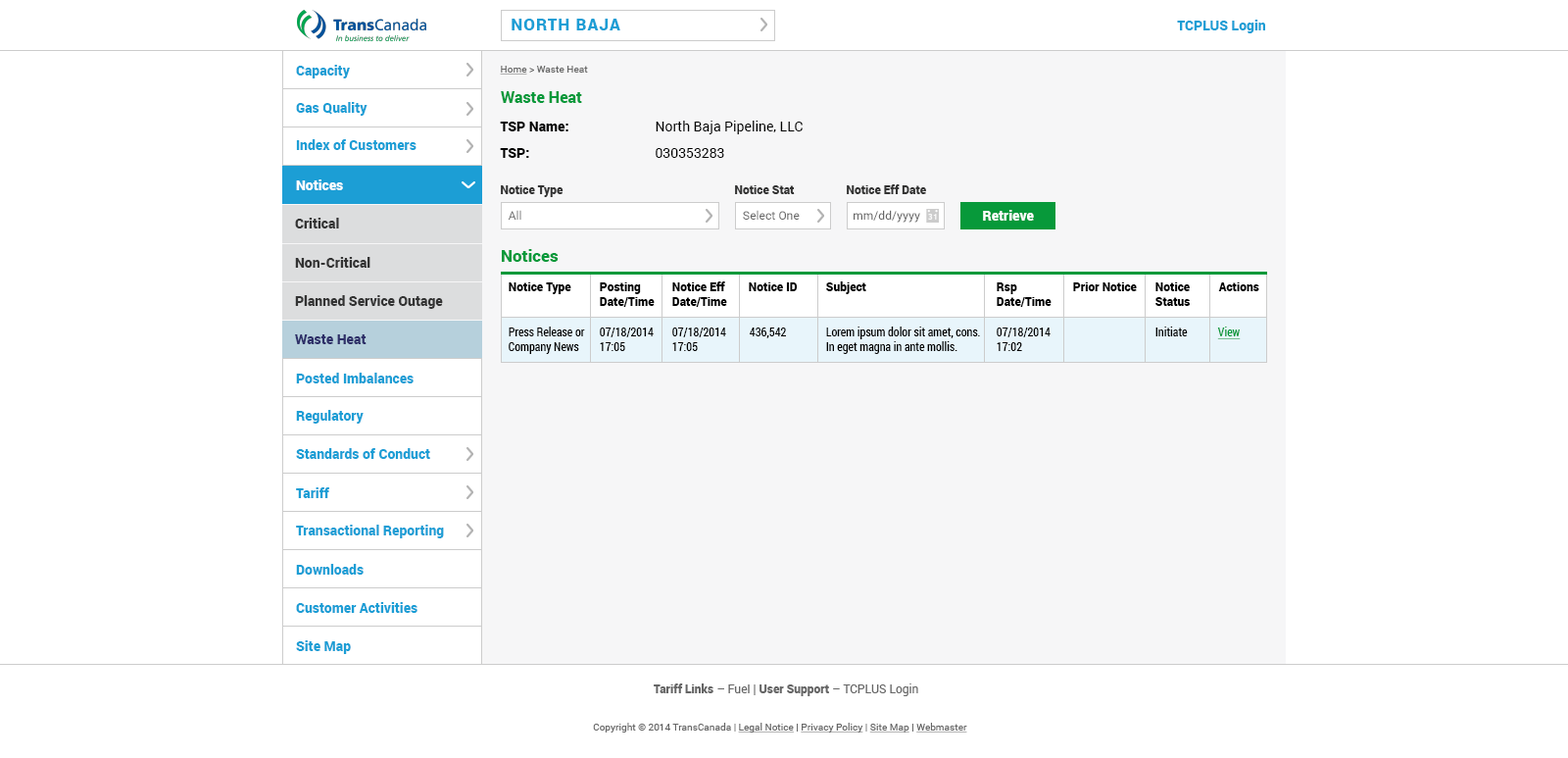
<style>
.page{position:relative;width:1568px;height:758px;background:#ffffff}
.page>*{position:absolute;margin:0}
.t1{font:16.7px "Roboto-Black";letter-spacing:0.06em;color:#1c9ed5}
.t2{font:13.7px "Roboto-Black";color:#1c9ed5}
.t3{font:9.8px "Roboto-Regular";color:#666666}
.t4{font:9.8px "Roboto-Regular";color:#666666;text-decoration:underline}
.t5{font:15.7px "Roboto-Black";color:#07993a}
.t6{font:13.7px/26.5px "Roboto-Black";color:#000000}
.t7{font:13.7px/26.5px "Roboto-Regular";color:#000000}
.t8{font:13.7px "Roboto-Black";color:#ffffff}
.t9{font:11.8px "Roboto-Black";color:#333333}
.t10{font:11.8px "Roboto-Regular";color:#666666}
.t11{font:13.7px "Roboto-Black";color:#333333}
.t12{font:16.7px "Roboto-Black";color:#07993a}
.t13{font:11.8px "Roboto-Black";color:#000000}
.t14{font:11.8px "RobotoCondensed-Regular";color:#000000}
.t15{font:11.8px "RobotoCondensed-Regular";color:#07993a;text-decoration:underline}
.t16{font:13.7px "Roboto-Black";color:#2e3069}
.t17{font:11.8px "Roboto-Black";color:#666666}
</style>
<div class="page">
<p class="t1" style="left:512px;top:19px;width:108px;height:11px">NORTH BAJA</p>
<p class="t2" style="left:1177px;top:20px;width:88px;height:13px">TCPLUS Login</p>
<p class="t2" style="left:296px;top:65px;width:54px;height:13px">Capacity</p>
<p class="t3" style="left:500px;top:66px;width:88px;height:8px"><span class="t4">Home</span> &gt; Waste Heat</p>
<p class="t2" style="left:296px;top:102px;width:72px;height:14px">Gas Quality</p>
<p class="t5" style="left:501px;top:91px;width:81px;height:12px">Waste Heat</p>
<p class="t6" style="left:500px;top:122px;width:68px;height:36px">TSP Name:<br>TSP:</p>
<p class="t7" style="left:656px;top:121px;width:147px;height:37px">North Baja Pipeline, LLC<br>030353283</p>
<p class="t2" style="left:296px;top:139px;width:120px;height:11px">Index of Customers</p>
<p class="t8" style="left:296px;top:179px;width:47px;height:11px">Notices</p>
<p class="t9" style="left:501px;top:185px;width:63px;height:12px">Notice Type</p>
<p class="t9" style="left:735px;top:185px;width:60px;height:9px">Notice Stat</p>
<p class="t9" style="left:847px;top:184px;width:79px;height:10px">Notice Eff Date</p>
<p class="t10" style="left:508px;top:210px;width:13px;height:10px">All</p>
<p class="t10" style="left:743px;top:210px;width:57px;height:10px">Select One</p>
<p class="t10" style="left:854px;top:210px;width:66px;height:12px">mm/dd/yyyy</p>
<p class="t8" style="left:983px;top:210px;width:51px;height:10px">Retrieve</p>
<p class="t11" style="left:295px;top:218px;width:44px;height:10px">Critical</p>
<p class="t11" style="left:295px;top:257px;width:75px;height:11px">Non-Critical</p>
<p class="t12" style="left:502px;top:249px;width:57px;height:13px">Notices</p>
<p class="t13" style="left:672px;top:281px;width:55px;height:26px">Notice Eff<br>Date/Time</p>
<p class="t13" style="left:826px;top:281px;width:40px;height:13px">Subject</p>
<p class="t13" style="left:509px;top:282px;width:62px;height:12px">Notice Type</p>
<p class="t13" style="left:600px;top:282px;width:55px;height:25px">Posting <br>Date/Time</p>
<p class="t13" style="left:749px;top:282px;width:49px;height:9px">Notice ID</p>
<p class="t13" style="left:997px;top:282px;width:55px;height:25px">Rsp <br>Date/Time</p>
<p class="t13" style="left:1073px;top:282px;width:64px;height:9px">Prior Notice</p>
<p class="t13" style="left:1155px;top:282px;width:35px;height:24px">Notice<br>Status</p>
<p class="t13" style="left:1218px;top:282px;width:41px;height:9px">Actions</p>
<p class="t11" style="left:295px;top:295px;width:148px;height:14px">Planned Service Outage</p>
<p class="t14" style="left:509px;top:326px;width:76px;height:28px">Press Release or<br>Company News</p>
<p class="t14" style="left:600px;top:327px;width:54px;height:24px">07/18/2014<br>17:05</p>
<p class="t14" style="left:672px;top:327px;width:54px;height:24px">07/18/2014<br>17:05</p>
<p class="t14" style="left:750px;top:327px;width:36px;height:11px">436,542</p>
<p class="t14" style="left:826px;top:326px;width:154px;height:28px">Lorem ipsum dolor sit amet, cons.<br>In eget magna in ante mollis.</p>
<p class="t14" style="left:997px;top:327px;width:54px;height:24px">07/18/2014<br>17:02</p>
<p class="t14" style="left:1155px;top:326px;width:33px;height:10px">Initiate</p>
<p class="t15" style="left:1217px;top:326px;width:24px;height:13px">View</p>
<p class="t16" style="left:295px;top:334px;width:72px;height:10px">Waste Heat</p>
<p class="t2" style="left:296px;top:372px;width:118px;height:11px">Posted Imbalances</p>
<p class="t2" style="left:296px;top:410px;width:68px;height:13px">Regulatory</p>
<p class="t2" style="left:296px;top:448px;width:134px;height:11px">Standards of Conduct</p>
<p class="t2" style="left:296px;top:487px;width:33px;height:11px">Tariff</p>
<p class="t2" style="left:296px;top:524px;width:148px;height:14px">Transactional Reporting</p>
<p class="t2" style="left:296px;top:564px;width:68px;height:10px">Downloads</p>
<p class="t2" style="left:296px;top:602px;width:121px;height:10px">Customer Activities</p>
<p class="t2" style="left:296px;top:640px;width:55px;height:14px">Site Map</p>
<p class="t17" style="left:654px;top:683px;width:264px;height:13px">Tariff Links<span class="t10"> – </span><span class="t10">Fuel | </span>User Support<span class="t10"> – </span><span class="t10">TCPLUS Login</span></p>
<p class="t3" style="left:593px;top:722px;width:374px;height:10px">Copyright © 2014 TransCanada | <span class="t4">Legal Notice</span> | <span class="t4">Privacy Policy</span> | <span class="t4">Site Map</span> | <span class="t4">Webmaster</span></p>
</div>
